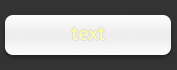
<style>
.page{position:relative;width:177px;height:70px;background:#333333}
.page>*{position:absolute;margin:0}
.t1{font:12px "MyriadPro-Regular";color:#fdfea3}
</style>
<div class="page">
<p class="t1" style="left:71px;top:27px;width:34px;height:13px">text</p>
</div>
